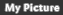
<style>
.page{position:relative;width:63px;height:15px;background:#333333}
.page>*{position:absolute;margin:0}
.t1{font:10px "AmiraParadiso";letter-spacing:0.075em;color:#ffffff}
</style>
<div class="page">
<p class="t1" style="left:5px;top:4px;width:54px;height:9px">My Picture</p>
</div>
